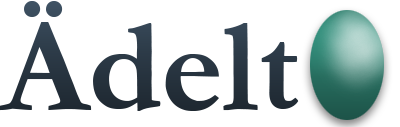
<style>
.page{position:relative;width:400px;height:127px;background:#ffffff}
.page>*{position:absolute;margin:0}
.t1{font:132.7px "Garamond-Bold";color:#2c3a47}
</style>
<div class="page">
<p class="t1" style="left:0px;top:1px;width:299px;height:110px">Ädelt</p>
</div>
